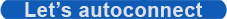
<style>
.page{position:relative;width:227px;height:19px;background:#0f5bb6}
.page>*{position:absolute;margin:0}
.t1{font:20px "Arial-BoldMT";letter-spacing:0.025em;color:#d9e1e9}
</style>
<div class="page">
<p class="t1" style="left:25px;top:2px;width:178px;height:15px">Let’s autoconnect</p>
</div>
